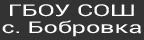
<style>
.page{position:relative;width:144px;height:40px;background:#333333}
.page>*{position:absolute;margin:0}
.t1{font:16.4px/17px "Roboto-Regular";color:#ffffff;font-variant:small-caps;scale:1.54 1}
</style>
<div class="page">
<p class="t1" style="left:2px;top:4px;width:139px;height:33px;text-align:center">ГБОУ СОШ<br>с. Бобровка</p>
</div>
